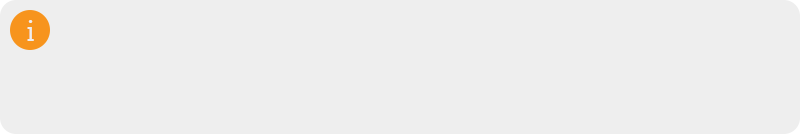
<style>
.page{position:relative;width:800px;height:134px;background:#eeeeee}
.page>*{position:absolute;margin:0}
.t1{font:30.6px "Slabo27px-Regular";color:#eeeeee}
</style>
<div class="page">
<p class="t1" style="left:27px;top:20px;width:7px;height:21px">i</p>
</div>
